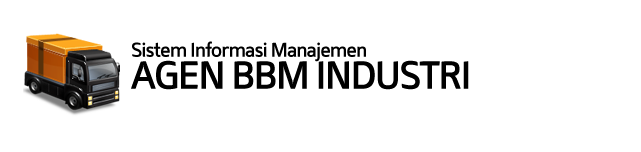
<style>
.page{position:relative;width:641px;height:152px;background:#ffffff}
.page>*{position:absolute;margin:0}
.t1{font:20.2px "Mentone-SemiBold";letter-spacing:-0.05em;color:#000000;scale:0.94 1}
.t2{font:39.3px "Mentone-SemiBold";letter-spacing:-0.05em;color:#000000;scale:0.95 1}
</style>
<div class="page">
<p class="t1" style="left:132px;top:41px;width:234px;height:21px">Sistem Informasi Manajemen</p>
<p class="t2" style="left:131px;top:60px;width:338px;height:30px">AGEN BBM INDUSTRI</p>
</div>
